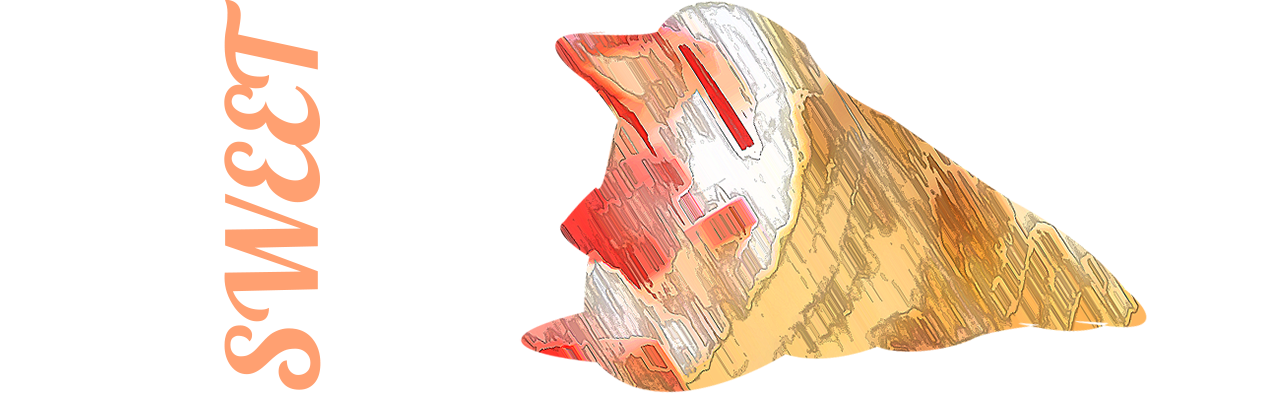
<style>
.page{position:relative;width:1280px;height:393px;background:#ffffff}
.page>*{position:absolute;margin:0}
.t1{font:124.2px "Lobster";color:#ffa071}
</style>
<div class="page">
<p class="t1" style="left:224px;top:0px;width:97px;height:390px;rotate:-90deg">SWEET</p>
</div>
